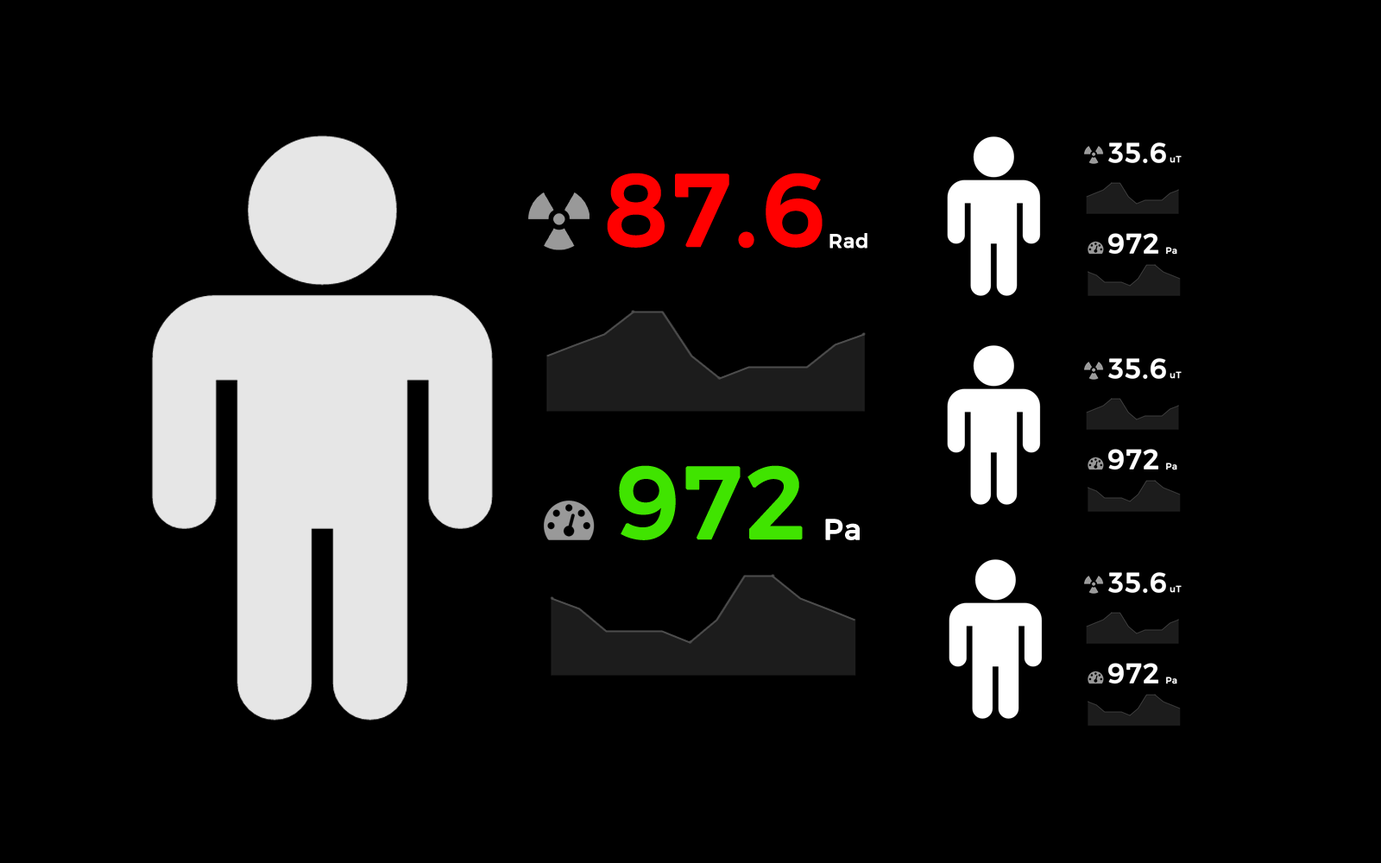
<style>
.page{position:relative;width:1381px;height:863px;background:#000000}
.page>*{position:absolute;margin:0}
.t1{font:100.7px "Montserrat-Regular";letter-spacing:0.025em;color:#ff0000;font-weight:bold}
.t2{font:19.1px "Montserrat-Regular";letter-spacing:0.025em;color:#ffffff;font-weight:bold}
.t3{font:100.7px "Montserrat-Regular";letter-spacing:0.025em;color:#40e400;font-weight:bold}
.t4{font:28.7px "Montserrat-Regular";letter-spacing:0.025em;color:#ffffff;font-weight:bold}
</style>
<div class="page">
<p class="t1" style="left:607px;top:173px;width:216px;height:76px">87.6</p>
<p class="t2" style="left:830px;top:233px;width:38px;height:16px">Rad</p>
<p class="t3" style="left:619px;top:465px;width:184px;height:75px">972</p>
<p class="t4" style="left:825px;top:519px;width:35px;height:21px">Pa</p>
</div>
